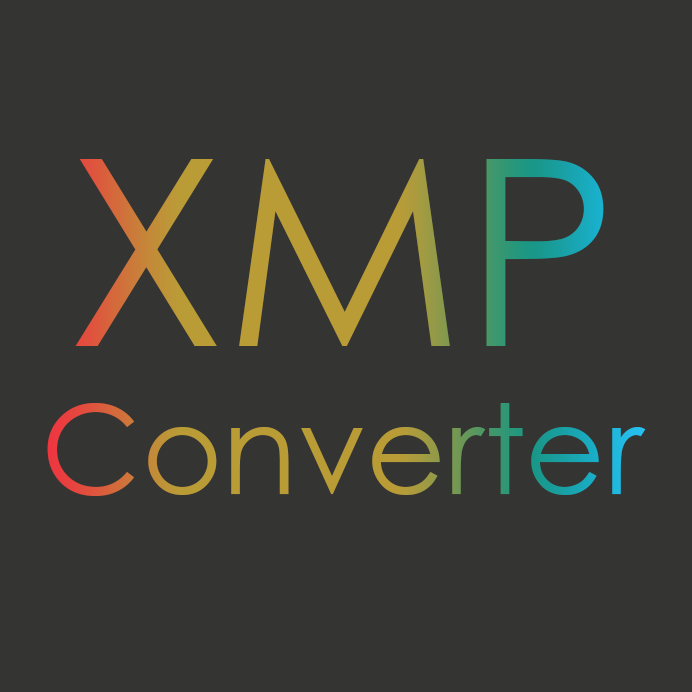
<style>
.page{position:relative;width:692px;height:692px;background:#343533}
.page>*{position:absolute;margin:0}
.t1{font:123.5px "CenturyGothic"}
.t2{font:259.7px "CenturyGothic"}
</style>
<div class="page">
<p class="t1" style="left:47px;top:159px;width:599px;height:337px;text-align:center"><span class="t2">XMP</span><br>Converter</p>
</div>
